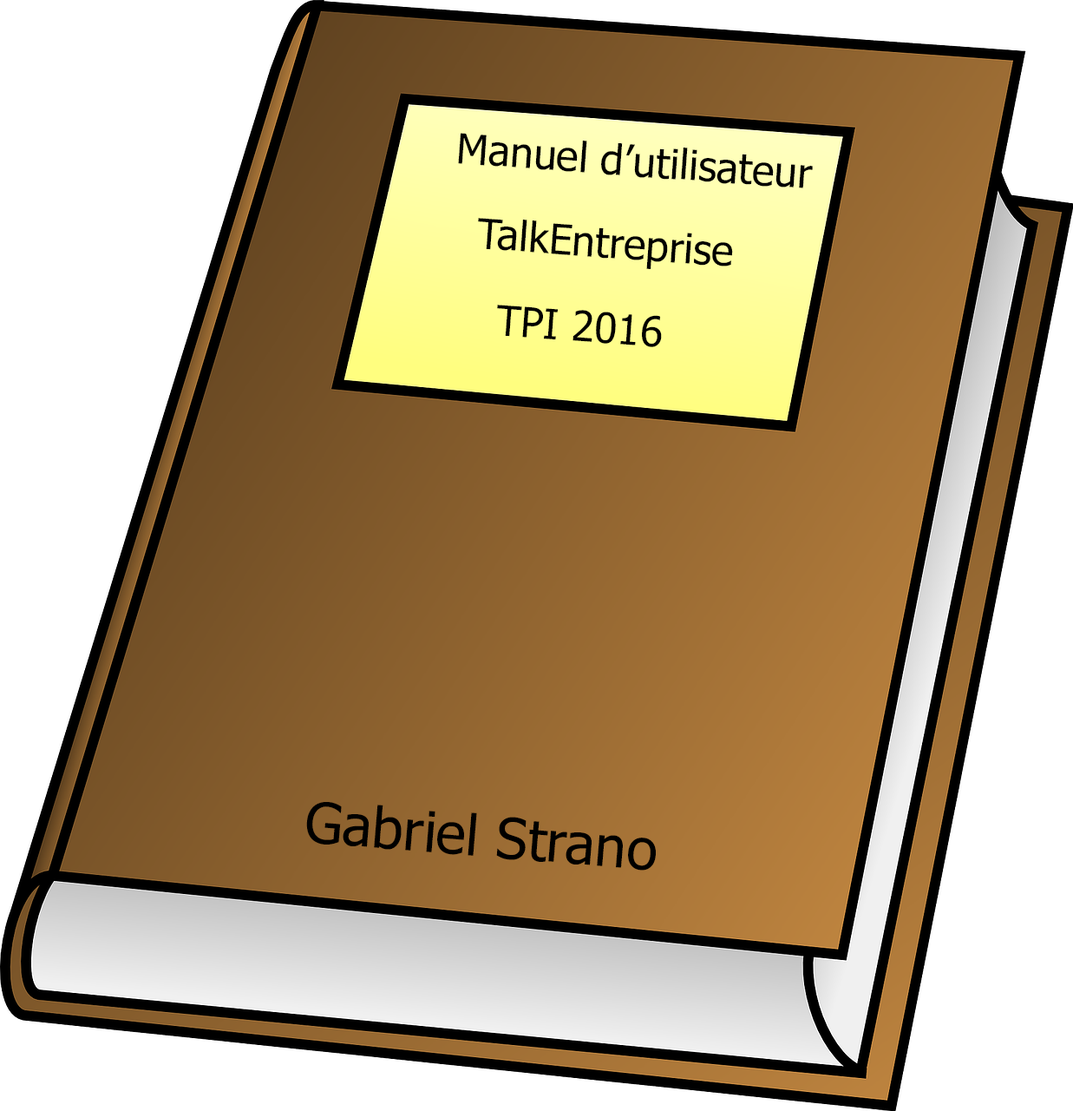
<style>
.page{position:relative;width:1073px;height:1111px;background:#ffffff}
.page>*{position:absolute;margin:0}
.t1{font:41.7px "Tahoma";color:#000000}
.t2{font:56.1px "Tahoma";color:#000000}
</style>
<div class="page">
<p class="t1" style="left:458px;top:133px;width:355px;height:55px;rotate:4deg">Manuel d’utilisateur</p>
<p class="t1" style="left:478px;top:218px;width:255px;height:51px;rotate:4deg">TalkEntreprise</p>
<p class="t1" style="left:497px;top:305px;width:165px;height:42px;rotate:4deg">TPI 2016</p>
<p class="t2" style="left:306px;top:802px;width:350px;height:68px;rotate:5deg">Gabriel Strano</p>
</div>
